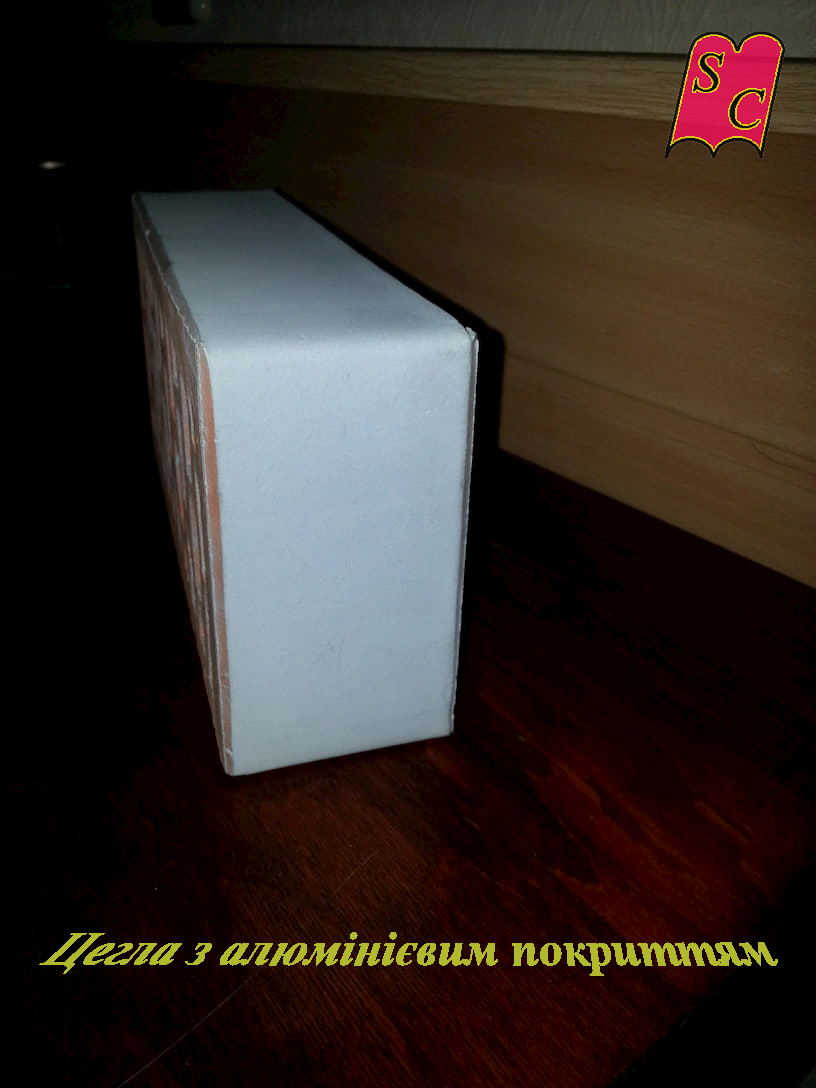
<style>
.page{position:relative;width:816px;height:1088px;background:#000000}
.page>*{position:absolute;margin:0}
.t1{font:48px "TimesNewRomanPS-BoldItalicMT";letter-spacing:0.01em;color:#b1b92d}
</style>
<div class="page">
<p class="t1" style="left:39px;top:932px;width:739px;height:44px">Цегла з алюмінієвим покриттям</p>
</div>
